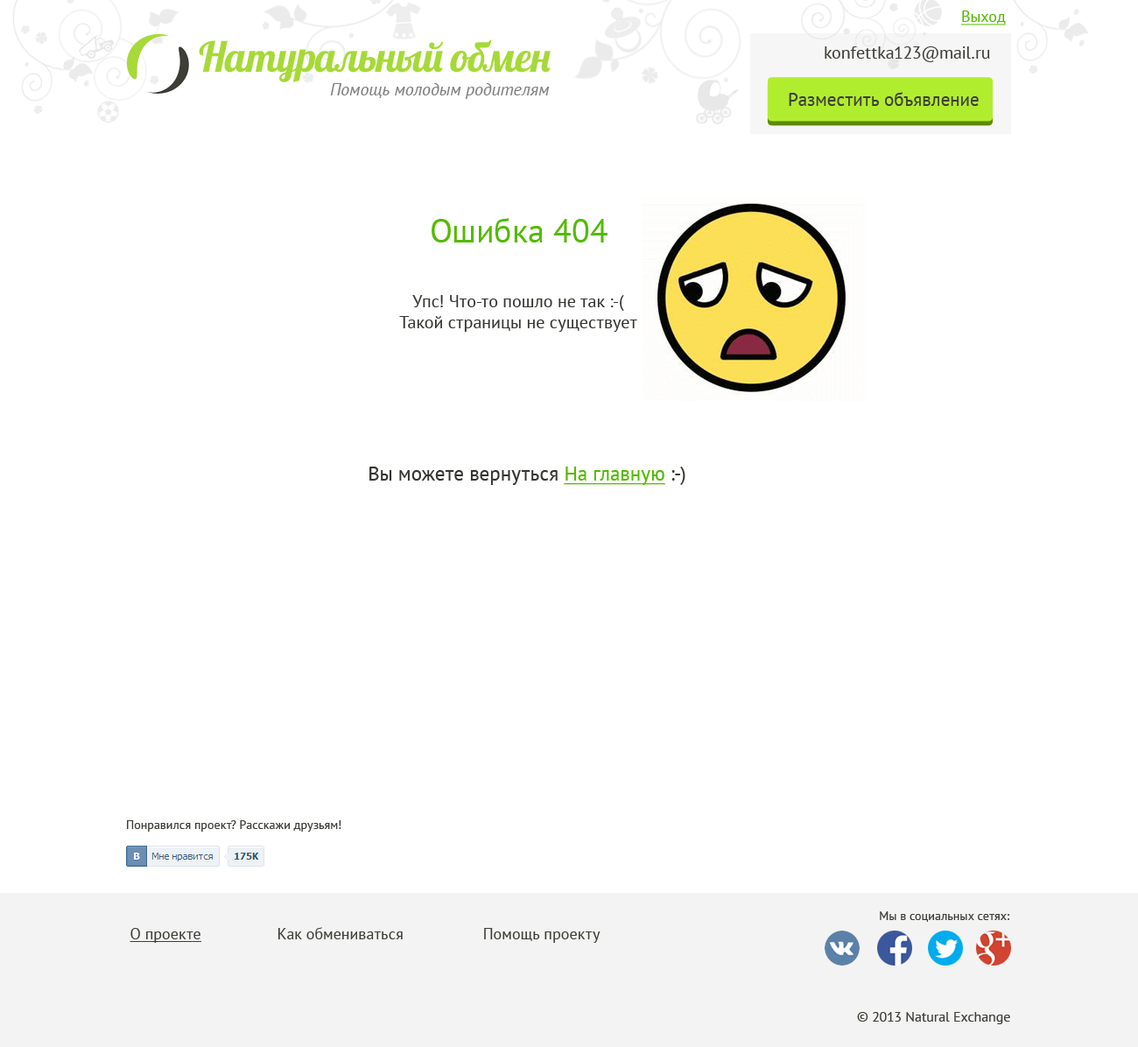
<style>
.page{position:relative;width:1138px;height:1047px;background:#ffffff}
.page>*{position:absolute;margin:0}
.t1{font:15.8px "PTSans-Regular";color:#53ba00;text-decoration:underline}
.t2{font:41.5px "Lobster";letter-spacing:-0.08em;color:#a6d937}
.t3{font:17.5px "PTSans-Regular";color:#3e3e38}
.t4{font:17.5px "PTSans-Italic";color:#7f7f7f}
.t5{font:18.4px "PTSans-Regular";color:#3e3e38}
.t6{font:33.3px "PTSans-Regular";color:#53ba00}
.t7{font:17.5px "PTSans-Regular";color:#353530}
.t8{font:20.1px "PTSans-Regular";color:#353530}
.t9{font:20.1px "PTSans-Regular";color:#53ba00;text-decoration:underline}
.t10{font:12.3px "PTSans-Regular";color:#3e3e38}
.t11{font:15.8px "PTSans-Regular";color:#3e3e38}
.t12{font:15.8px "PTSans-Regular";color:#3e3e38;text-decoration:underline}
.t13{font:14px "PTSans-Regular";color:#3e3e38}
</style>
<div class="page">
<p class="t1" style="left:962px;top:11px;width:44px;height:14px">Выход</p>
<p class="t2" style="left:199px;top:40px;width:352px;height:42px">Натуральный  обмен</p>
<p class="t3" style="left:825px;top:46px;width:165px;height:16px">konfettka123@mail.ru</p>
<p class="t4" style="left:330px;top:83px;width:220px;height:16px">Помощь молодым родителям</p>
<p class="t5" style="left:789px;top:92px;width:190px;height:14px">Разместить объявление</p>
<p class="t6" style="left:432px;top:218px;width:176px;height:25px">Ошибка 404</p>
<p class="t7" style="left:412px;top:295px;width:212px;height:16px">Упс! Что-то пошло не так :-(</p>
<p class="t7" style="left:399px;top:316px;width:239px;height:16px">Такой страницы не существует</p>
<p class="t8" style="left:370px;top:467px;width:316px;height:18px">Вы можете вернуться <span class="t9">На главную</span> :-)</p>
<p class="t10" style="left:127px;top:821px;width:215px;height:11px">Понравился проект? Расскажи друзьям!</p>
<p class="t10" style="left:880px;top:912px;width:130px;height:10px">Мы в социальных сетях:</p>
<p class="t11" style="left:130px;top:927px;width:471px;height:16px"><span class="t12">О проекте</span>       Как обмениваться            Помощь  проекту</p>
<p class="t13" style="left:857px;top:1012px;width:154px;height:13px">© 2013 Natural Exchange</p>
</div>
